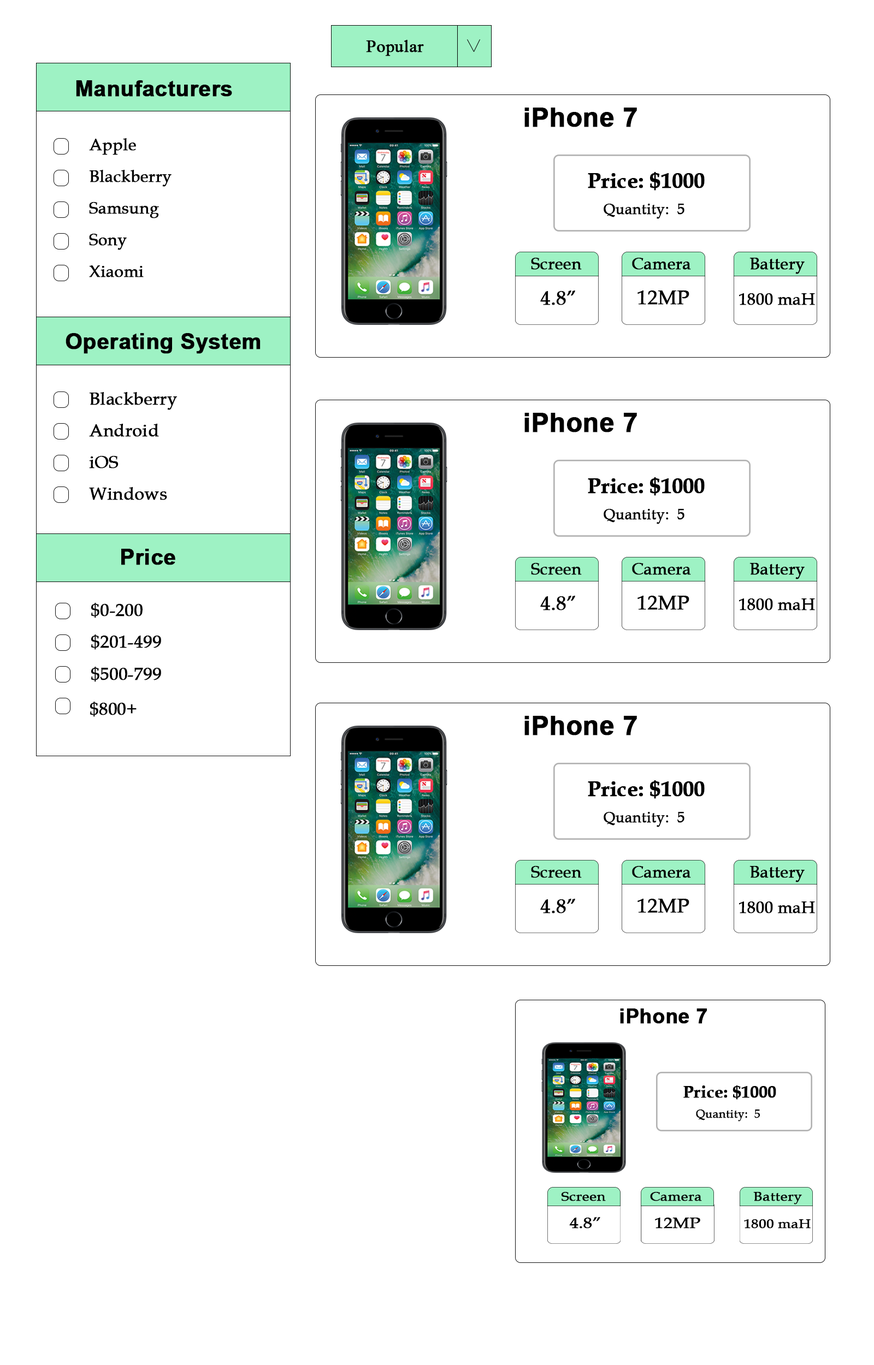
<style>
.page{position:relative;width:874px;height:1365px;background:#ffffff}
.page>*{position:absolute;margin:0}
.t1{font:17.5px "TimesNewRomanPSMT";color:#000000;font-weight:bold}
.t2{font:21.8px "Arial-BoldMT";color:#010101;font-weight:bold}
.t3{font:26.2px "Arial-BoldMT";color:#000000;font-weight:bold}
.t4{font:16.4px "BookAntiqua";color:#000000;font-weight:bold}
.t5{font:21.6px "BookAntiqua-Bold";color:#000000;font-weight:bold}
.t6{font:15.5px "BookAntiqua";color:#000000;font-weight:bold;scale:0.95 1}
.t7{font:19.7px "BookAntiqua";color:#000000;font-weight:bold}
.t8{font:17.5px "BookAntiqua";color:#000000;font-weight:bold}
.t9{font:20px "Arial-BoldMT";color:#000000;font-weight:bold}
.t10{font:16.7px "BookAntiqua-Bold";color:#000000;font-weight:bold}
.t11{font:12px "BookAntiqua";color:#000000;font-weight:bold}
.t12{font:12.7px "BookAntiqua";color:#000000;font-weight:bold;scale:1.13 1}
.t13{font:15.3px "BookAntiqua";color:#000000;font-weight:bold;scale:1.13 1}
</style>
<div class="page">
<p class="t1" style="left:366px;top:40px;width:58px;height:16px">Popular</p>
<p class="t2" style="left:76px;top:80px;width:156px;height:17px">Manufacturers</p>
<p class="t3" style="left:524px;top:108px;width:113px;height:19px">iPhone 7</p>
<p class="t4" style="left:89px;top:138px;width:47px;height:17px">Apple</p>
<p class="t4" style="left:89px;top:170px;width:82px;height:17px">Blackberry</p>
<p class="t5" style="left:587px;top:172px;width:117px;height:19px">Price: $1000</p>
<p class="t4" style="left:89px;top:202px;width:70px;height:16px">Samsung</p>
<p class="t6" style="left:603px;top:204px;width:81px;height:15px">Quantity:  5</p>
<p class="t4" style="left:89px;top:234px;width:38px;height:16px">Sony</p>
<p class="t4" style="left:531px;top:258px;width:50px;height:12px">Screen</p>
<p class="t4" style="left:632px;top:258px;width:59px;height:12px">Camera</p>
<p class="t4" style="left:749px;top:258px;width:55px;height:16px">Battery</p>
<p class="t4" style="left:89px;top:265px;width:55px;height:12px">Xiaomi</p>
<p class="t7" style="left:540px;top:290px;width:35px;height:15px">4.8”</p>
<p class="t7" style="left:637px;top:290px;width:52px;height:15px">12MP</p>
<p class="t4" style="left:739px;top:293px;width:76px;height:12px">1800 maH</p>
<p class="t2" style="left:66px;top:333px;width:194px;height:21px">Operating System</p>
<p class="t8" style="left:89px;top:392px;width:88px;height:18px">Blackberry</p>
<p class="t3" style="left:524px;top:413px;width:113px;height:19px">iPhone 7</p>
<p class="t8" style="left:89px;top:424px;width:70px;height:13px">Android</p>
<p class="t8" style="left:89px;top:456px;width:29px;height:12px">iOS</p>
<p class="t5" style="left:587px;top:477px;width:117px;height:19px">Price: $1000</p>
<p class="t8" style="left:89px;top:487px;width:78px;height:13px">Windows</p>
<p class="t6" style="left:603px;top:509px;width:81px;height:15px">Quantity:  5</p>
<p class="t2" style="left:121px;top:549px;width:54px;height:16px">Price</p>
<p class="t4" style="left:531px;top:563px;width:50px;height:12px">Screen</p>
<p class="t4" style="left:632px;top:563px;width:59px;height:12px">Camera</p>
<p class="t4" style="left:749px;top:563px;width:55px;height:16px">Battery</p>
<p class="t8" style="left:91px;top:603px;width:52px;height:15px">$0-200</p>
<p class="t7" style="left:540px;top:596px;width:35px;height:14px">4.8”</p>
<p class="t7" style="left:637px;top:596px;width:52px;height:14px">12MP</p>
<p class="t4" style="left:739px;top:598px;width:76px;height:12px">1800 maH</p>
<p class="t8" style="left:91px;top:634px;width:70px;height:16px">$201-499</p>
<p class="t8" style="left:91px;top:667px;width:70px;height:15px">$500-799</p>
<p class="t8" style="left:90px;top:702px;width:46px;height:15px">$800+<br>+++</p>
<p class="t3" style="left:524px;top:716px;width:113px;height:19px">iPhone 7</p>
<p class="t5" style="left:587px;top:780px;width:117px;height:19px">Price: $1000</p>
<p class="t6" style="left:603px;top:812px;width:81px;height:15px">Quantity:  5</p>
<p class="t4" style="left:531px;top:866px;width:50px;height:12px">Screen</p>
<p class="t4" style="left:632px;top:866px;width:59px;height:12px">Camera</p>
<p class="t4" style="left:749px;top:866px;width:55px;height:16px">Battery</p>
<p class="t7" style="left:540px;top:899px;width:35px;height:14px">4.8”</p>
<p class="t7" style="left:637px;top:899px;width:52px;height:14px">12MP</p>
<p class="t4" style="left:739px;top:901px;width:76px;height:12px">1800 maH</p>
<p class="t9" style="left:620px;top:1008px;width:87px;height:16px">iPhone 7</p>
<p class="t10" style="left:683px;top:1085px;width:93px;height:15px">Price: $1000</p>
<p class="t11" style="left:696px;top:1109px;width:64px;height:12px">Quantity:  5</p>
<p class="t12" style="left:561px;top:1192px;width:45px;height:9px">Screen</p>
<p class="t12" style="left:650px;top:1192px;width:52px;height:9px">Camera</p>
<p class="t12" style="left:753px;top:1192px;width:49px;height:12px">Battery</p>
<p class="t13" style="left:569px;top:1217px;width:31px;height:11px">4.8”</p>
<p class="t13" style="left:655px;top:1218px;width:45px;height:10px">12MP</p>
<p class="t12" style="left:744px;top:1219px;width:66px;height:9px">1800 maH</p>
</div>
